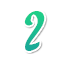
<style>
.page{position:relative;width:64px;height:64px;background:#ffffff}
.page>*{position:absolute;margin:0}
.t1{font:72px "MaroonedOnMarsBB";color:#1dc28d}
</style>
<div class="page">
<p class="t1" style="left:24px;top:11px;width:21px;height:40px">2</p>
</div>
